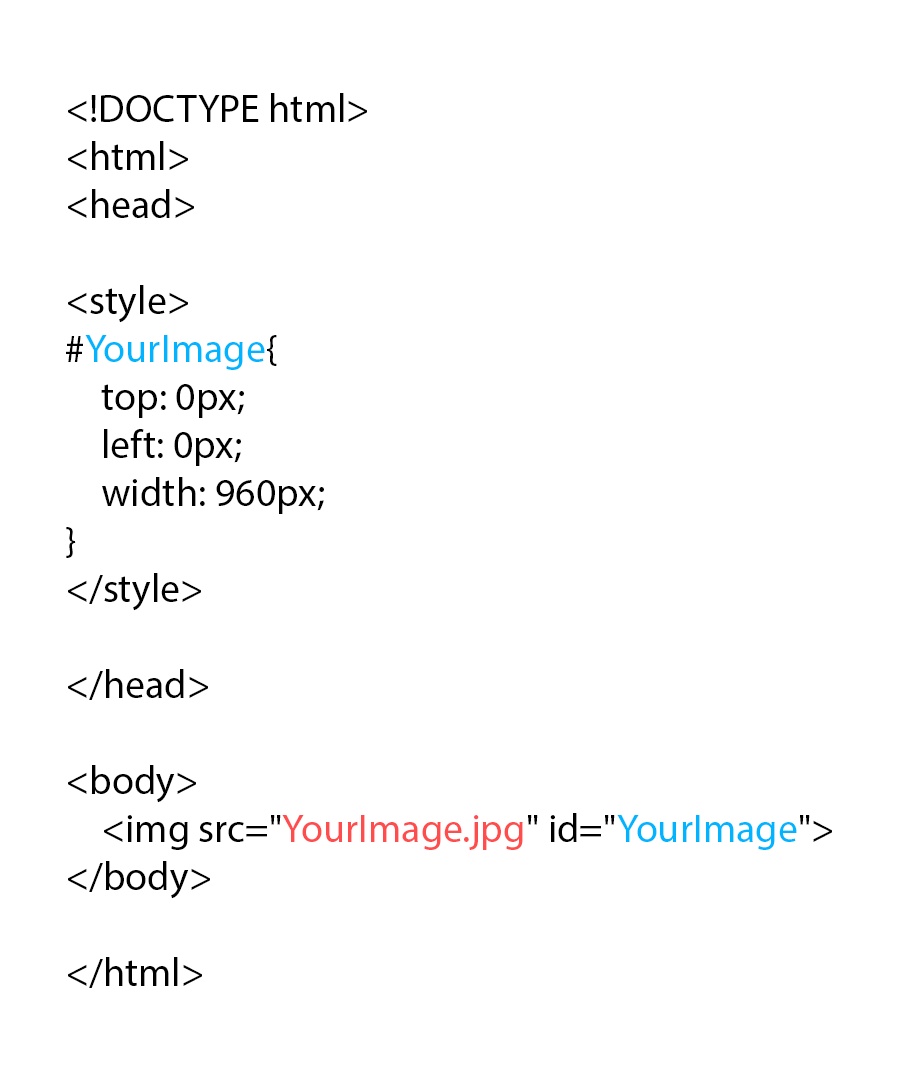
<style>
.page{position:relative;width:900px;height:1080px;background:#ffffff}
.page>*{position:absolute;margin:0}
.t1{font:40px "MyriadPro-Regular";color:#000000}
.t2{font:40px "MyriadPro-Regular";color:#00b4ff}
.t3{font:40px "MyriadPro-Regular";color:#ff4c4c}
</style>
<div class="page">
<p class="t1" style="left:66px;top:93px;width:766px;height:895px">&lt;!DOCTYPE html&gt;<br>&lt;html&gt;<br>&lt;head&gt;<br><br>&lt;style&gt;<br>#<span class="t2">YourImage</span>{<br> top: 0px;<br> left: 0px;<br> width: 960px;<br>}<br>&lt;/style&gt;<br><br>&lt;/head&gt;<br><br>&lt;body&gt;<br> &lt;img src="<span class="t3">YourImage.jpg</span>" id="<span class="t2">YourImage</span>"&gt; <br>&lt;/body&gt;<br><br>&lt;/html&gt;</p>
</div>
